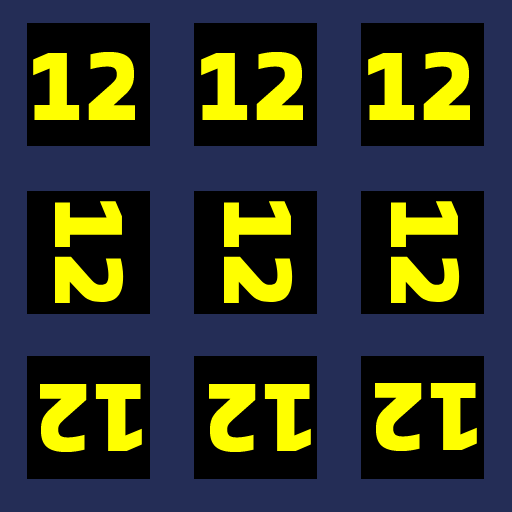
<style>
.page{position:relative;width:512px;height:512px;background:#242d56}
.page>*{position:absolute;margin:0}
.t1{font:130px "Share-BoldOSF";color:#ffff00}
</style>
<div class="page">
<p class="t1" style="left:33px;top:51px;width:102px;height:69px">12</p>
<p class="t1" style="left:201px;top:51px;width:102px;height:69px">12</p>
<p class="t1" style="left:368px;top:51px;width:102px;height:69px">12</p>
<p class="t1" style="left:55px;top:201px;width:69px;height:102px;rotate:90deg">12</p>
<p class="t1" style="left:224px;top:201px;width:69px;height:102px;rotate:90deg">12</p>
<p class="t1" style="left:391px;top:201px;width:69px;height:102px;rotate:90deg">12</p>
<p class="t1" style="left:40px;top:383px;width:102px;height:70px;rotate:-180deg">12</p>
<p class="t1" style="left:209px;top:383px;width:102px;height:70px;rotate:-180deg">12</p>
<p class="t1" style="left:375px;top:382px;width:102px;height:70px;rotate:-180deg">12</p>
</div>
